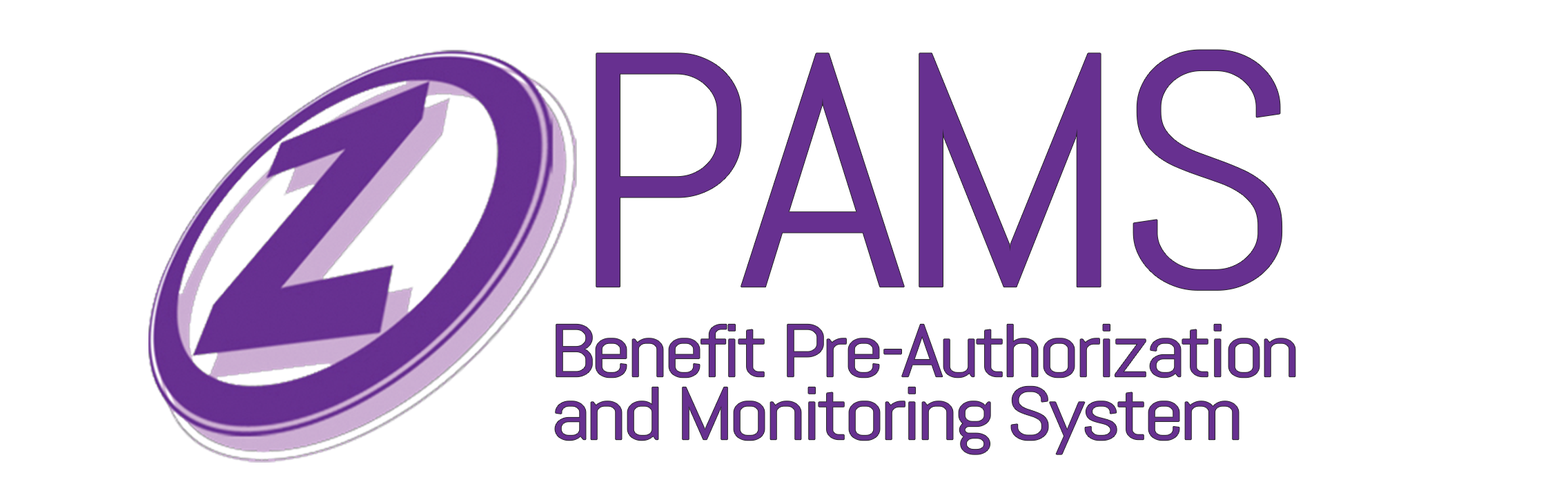
<style>
.page{position:relative;width:1568px;height:500px;background:#ffffff}
.page>*{position:absolute;margin:0}
.t1{font:332.6px "Abel-Regular";letter-spacing:-0.075em;color:#673090;font-weight:bold;scale:1.1 1}
.t2{font:74px "Abel-Regular";letter-spacing:-0.075em;color:#673090;font-weight:bold;scale:1.21 1}
</style>
<div class="page">
<p class="t1" style="left:596px;top:50px;width:686px;height:240px">PAMS</p>
<p class="t2" style="left:556px;top:324px;width:739px;height:54px">Benefit Pre-Authorization</p>
<p class="t2" style="left:555px;top:386px;width:684px;height:68px">and Monitoring System</p>
</div>
